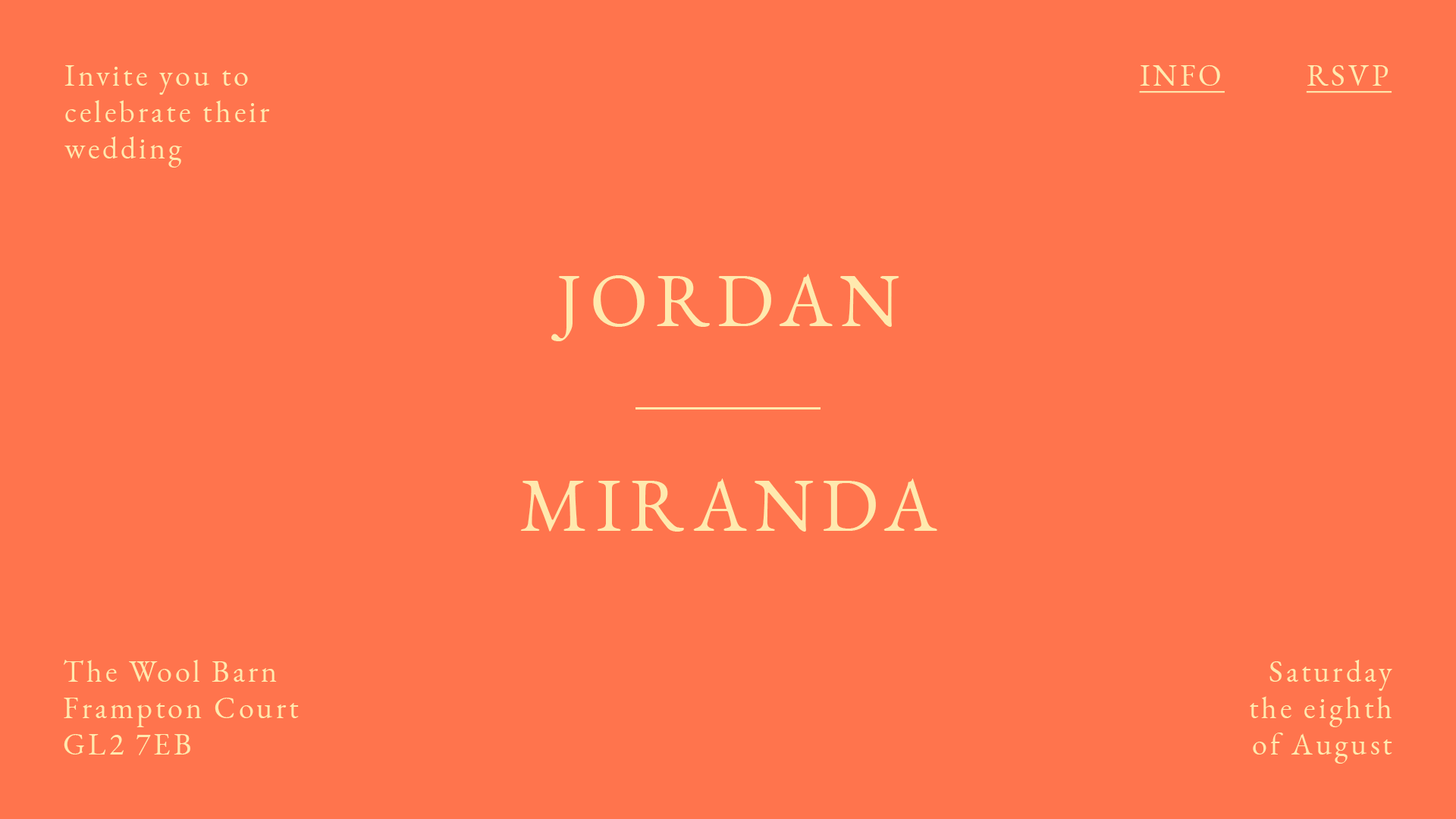
<style>
.page{position:relative;width:1456px;height:819px;background:#ff744d}
.page>*{position:absolute;margin:0}
.t1{font:30.3px "EBGaramond-Regular";letter-spacing:0.1em;color:#ffe9ae}
.t2{font:30.3px "EBGaramond-Regular";letter-spacing:0.1em;color:#ffe9ae;text-decoration:underline}
.t3{font:75.8px "EBGaramond-Regular";letter-spacing:0.1em;color:#ffe9ae}
</style>
<div class="page">
<p class="t1" style="left:64px;top:65px;width:206px;height:103px">Invite you to <br>celebrate their <br>wedding</p>
<p class="t2" style="left:1139px;top:65px;width:253px;height:28px">INFO         RSVP</p>
<p class="t3" style="left:551px;top:274px;width:348px;height:67px">JORDAN</p>
<p class="t3" style="left:520px;top:479px;width:417px;height:53px">MIRANDA</p>
<p class="t1" style="left:64px;top:660px;width:235px;height:95px">The Wool Barn<br>Frampton Court<br>GL2 7EB</p>
<p class="t1" style="left:1250px;top:660px;width:142px;height:104px;text-align:right">Saturday <br>the eighth <br>of August</p>
</div>
